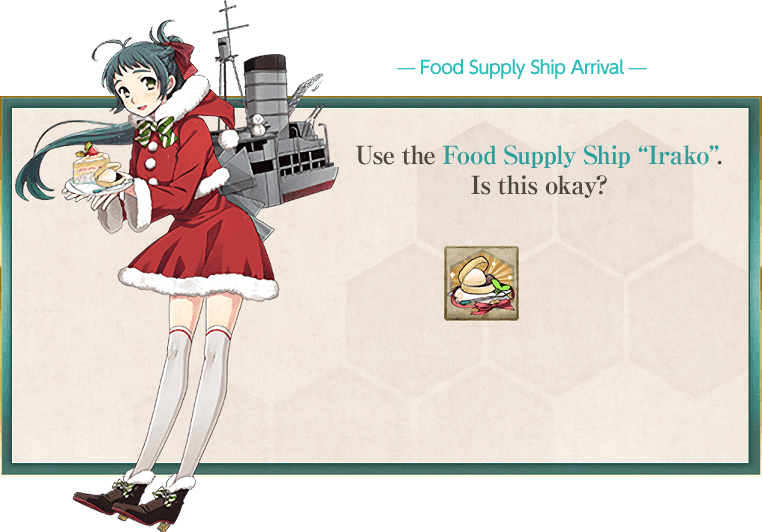
<style>
.page{position:relative;width:762px;height:532px;background:#ffffff}
.page>*{position:absolute;margin:0}
.t1{font:18px "UDShinGoPro-Medium";letter-spacing:-0.04em;color:#2bbcbe}
.t2{font:25px "RyuminPro-ExBold";letter-spacing:-0.04em;color:#2b9e9e}
.t3{font:25px "RyuminPro-ExBold";letter-spacing:-0.04em;color:#4d4742}
</style>
<div class="page">
<p class="t1" style="left:397px;top:59px;width:250px;height:20px">— Food Supply Ship Arrival —</p>
<p class="t2" style="left:355px;top:145px;width:367px;height:53px;text-align:center"><span class="t3">Use the </span>Food Supply Ship “Irako”<span class="t3">.<br>Is this okay?</span></p>
</div>
